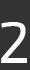
<style>
.page{position:relative;width:30px;height:70px;background:#333333}
.page>*{position:absolute;margin:0}
.t1{font:57px "Exo2-Regular";color:#ffffff}
</style>
<div class="page">
<p class="t1" style="left:1px;top:22px;width:26px;height:41px">2</p>
</div>
